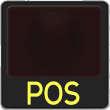
<style>
.page{position:relative;width:110px;height:110px}
.page>*{position:absolute;margin:0}
.t1{font:32.3px "ELURERegular";color:#ffff36;text-transform:uppercase;scale:0.9 1}
</style>
<div class="page">
<p class="t1" style="left:27px;top:81px;width:53px;height:24px">POS</p>
</div>
